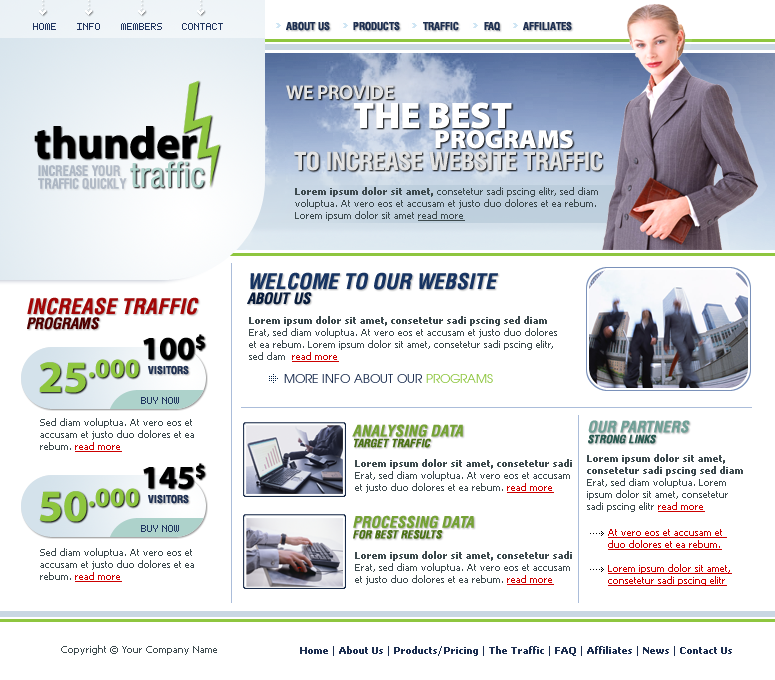
<style>
.page{position:relative;width:775px;height:680px;background:#ffffff}
.page>*{position:absolute;margin:0}
.t1{font:10px "Bit-Light10-(sRB)";color:#203560}
.t2{font:11px "HeliosCondBold";color:#1d2f51;text-transform:uppercase}
.t3{font:20px "MyriadPro-Semibold";color:#e3e3e3;text-transform:uppercase}
.t4{font:37px "MyriadPro-Black";color:#ffffff;text-transform:uppercase}
.t5{font:45px "MyriadPro-Bold";color:#000000}
.t6{font:26px "MyriadPro-Black";color:#ffffff;text-transform:uppercase}
.t7{font:35px "HeliosCond";color:#add2cb}
.t8{font:25px "HeliosCondBold";color:#e3e3e3;text-transform:uppercase}
.t9{font:14.3px/12.9px "HeliosCondBold";color:#b0b9c5;text-transform:uppercase;scale:0.9 1}
.t10{font:10px "Tahoma";color:#3e4b4f}
.t11{font:10px "Tahoma-Bold";color:#3e4b4f}
.t12{font:10px "Tahoma";color:#3e4b4f;text-decoration:underline}
.t13{font:21px/14.8px "Helvetica-Condensed-BoldObl";color:#173462;text-transform:uppercase}
.t14{font:15px/14.8px "Helvetica-Condensed-BoldObl";color:#081c3c;text-transform:uppercase}
.t15{font:21px/14.8px "Helvetica-Condensed-BoldObl";color:#a20707;text-transform:uppercase}
.t16{font:15px/14.8px "Helvetica-Condensed-BoldObl";color:#4f0000;text-transform:uppercase}
.t17{font:10px "Tahoma";color:#cc0000;text-decoration:underline}
.t18{font:32px "MyriadPro-Bold";color:#000000}
.t19{font:45px "MyriadPro-Bold";color:#8ec63f}
.t20{font:12px "Avian";color:#1d2f51;text-transform:uppercase}
.t21{font:12px "Avian";color:#8ec63f;text-transform:uppercase}
.t22{font:15.3px/10.8px "Helvetica-Condensed-BoldObl";color:#75a235;text-transform:uppercase}
.t23{font:10.9px/10.8px "Helvetica-Condensed-BoldObl";color:#4b7215;text-transform:uppercase}
.t24{font:15.3px/10.8px "Helvetica-Condensed-BoldObl";color:#70a097;text-transform:uppercase}
.t25{font:10.9px/10.8px "Helvetica-Condensed-BoldObl";color:#2a5b52;text-transform:uppercase}
.t26{font:10px "Tahoma-Bold";color:#1d2f51}
.t27{font:10px "Tahoma";color:#1d2f51}
</style>
<div class="page">
<p class="t1" style="left:33px;top:23px;width:23px;height:7px">HOME</p>
<p class="t1" style="left:77px;top:23px;width:23px;height:7px">INFO</p>
<p class="t1" style="left:121px;top:23px;width:41px;height:7px">MEMBERS</p>
<p class="t1" style="left:182px;top:23px;width:41px;height:7px">CONTACT</p>
<p class="t2" style="left:286px;top:21px;width:44px;height:10px">ABOUT US</p>
<p class="t2" style="left:353px;top:21px;width:47px;height:10px">PRODUCTS</p>
<p class="t2" style="left:423px;top:21px;width:36px;height:10px">TRAFFIC</p>
<p class="t2" style="left:484px;top:21px;width:17px;height:10px">FAQ</p>
<p class="t2" style="left:523px;top:21px;width:49px;height:10px">AFFILIATES</p>
<p class="t3" style="left:286px;top:85px;width:108px;height:15px">we provide</p>
<p class="t4" style="left:353px;top:102px;width:159px;height:27px">the best</p>
<p class="t5" style="left:34px;top:126px;width:163px;height:33px">thunder</p>
<p class="t6" style="left:435px;top:130px;width:138px;height:19px">programs</p>
<p class="t7" style="left:130px;top:161px;width:74px;height:27px">traffic</p>
<p class="t8" style="left:294px;top:151px;width:308px;height:20px">TO INCREASE website traffic</p>
<p class="t9" style="left:38px;top:165px;width:89px;height:25px">INCREASE YOUR <br>TRAFFIC QUICKLY</p>
<p class="t10" style="left:295px;top:187px;width:303px;height:34px"><span class="t11">Lorem ipsum dolor sit amet, </span>consetetur sadi pscing elitr, sed diam voluptua. At vero eos et accusam et justo duo dolores et ea rebum. Lorem ipsum dolor sit amet <span class="t12">read more</span></p>
<p class="t13" style="left:247px;top:272px;width:251px;height:33px">WELCOME TO OUR WEBSITE<br><span class="t14">ABOUT US</span></p>
<p class="t15" style="left:27px;top:297px;width:172px;height:33px">increase TRAFFIC<br><span class="t16">PROgrams</span></p>
<p class="t10" style="left:249px;top:316px;width:308px;height:46px"><span class="t11">Lorem ipsum dolor sit amet, consetetur sadi pscing sed diam<br></span>Erat, sed diam voluptua. At vero eos et accusam et justo duo dolores et ea rebum. Lorem ipsum dolor sit amet, consetetur sadi pscing elitr, sed dam  <span class="t17">read more</span></p>
<p class="t18" style="left:143px;top:334px;width:62px;height:26px">100$</p>
<p class="t19" style="left:39px;top:359px;width:100px;height:34px">25.000</p>
<p class="t2" style="left:148px;top:365px;width:41px;height:10px">VISITORS</p>
<p class="t20" style="left:284px;top:374px;width:209px;height:9px">MORE INFO ABOUT OUR <span class="t21">PROGRAMS</span></p>
<p class="t1" style="left:141px;top:397px;width:38px;height:7px">BUY NOW</p>
<p class="t10" style="left:40px;top:418px;width:154px;height:34px">Sed diam voluptua. At vero eos et accusam et justo duo dolores et ea rebum. <span class="t17">read more</span></p>
<p class="t22" style="left:352px;top:424px;width:111px;height:24px">ANALYSING DATA<br><span class="t23">TARGET TRAFFIC</span></p>
<p class="t24" style="left:588px;top:420px;width:102px;height:24px">OUR PARTNERS<br><span class="t25">STRONG LINKS</span></p>
<p class="t10" style="left:355px;top:459px;width:217px;height:34px"><span class="t11">Lorem ipsum dolor sit amet, consetetur sadi </span>Erat, sed diam voluptua. At vero eos et accusam et justo duo dolores et ea rebum. <span class="t17">read more</span></p>
<p class="t10" style="left:587px;top:454px;width:156px;height:58px"><span class="t11">Lorem ipsum dolor sit amet, consetetur sadi pscing sed diam<br></span>Erat, sed diam voluptua. Lorem ipsum dolor sit amet, consetetur sadi pscing elitr <span class="t17">read more</span></p>
<p class="t18" style="left:143px;top:463px;width:62px;height:26px">145$</p>
<p class="t19" style="left:39px;top:488px;width:100px;height:34px">50.000</p>
<p class="t2" style="left:148px;top:494px;width:41px;height:10px">VISITORS</p>
<p class="t23" style="left:353px;top:515px;width:121px;height:24px"><span class="t22">PROCESSING DATA<br></span>FOR BEST RESULTS</p>
<p class="t1" style="left:141px;top:525px;width:38px;height:7px">BUY NOW</p>
<p class="t17" style="left:608px;top:529px;width:124px;height:57px">At vero eos et accusam et <br>duo dolores et ea rebum.<br><br>Lorem ipsum dolor sit amet, consetetur sadi pscing elitr</p>
<p class="t10" style="left:40px;top:548px;width:154px;height:34px">Sed diam voluptua. At vero eos et accusam et justo duo dolores et ea rebum. <span class="t17">read more</span></p>
<p class="t10" style="left:355px;top:551px;width:217px;height:34px"><span class="t11">Lorem ipsum dolor sit amet, consetetur sadi </span>Erat, sed diam voluptua. At vero eos et accusam et justo duo dolores et ea rebum. <span class="t17">read more</span></p>
<p class="t10" style="left:61px;top:645px;width:156px;height:10px">Copyright © Your Company Name</p>
<p class="t26" style="left:300px;top:646px;width:432px;height:10px"><span class="t27">  </span>Home <span class="t27">| </span>About Us <span class="t27">| </span>Products/Pricing <span class="t27">| </span>The Traffic <span class="t27">| </span>FAQ <span class="t27">| </span>Affiliates <span class="t27">| </span>News <span class="t27">| </span>Contact Us</p>
</div>
